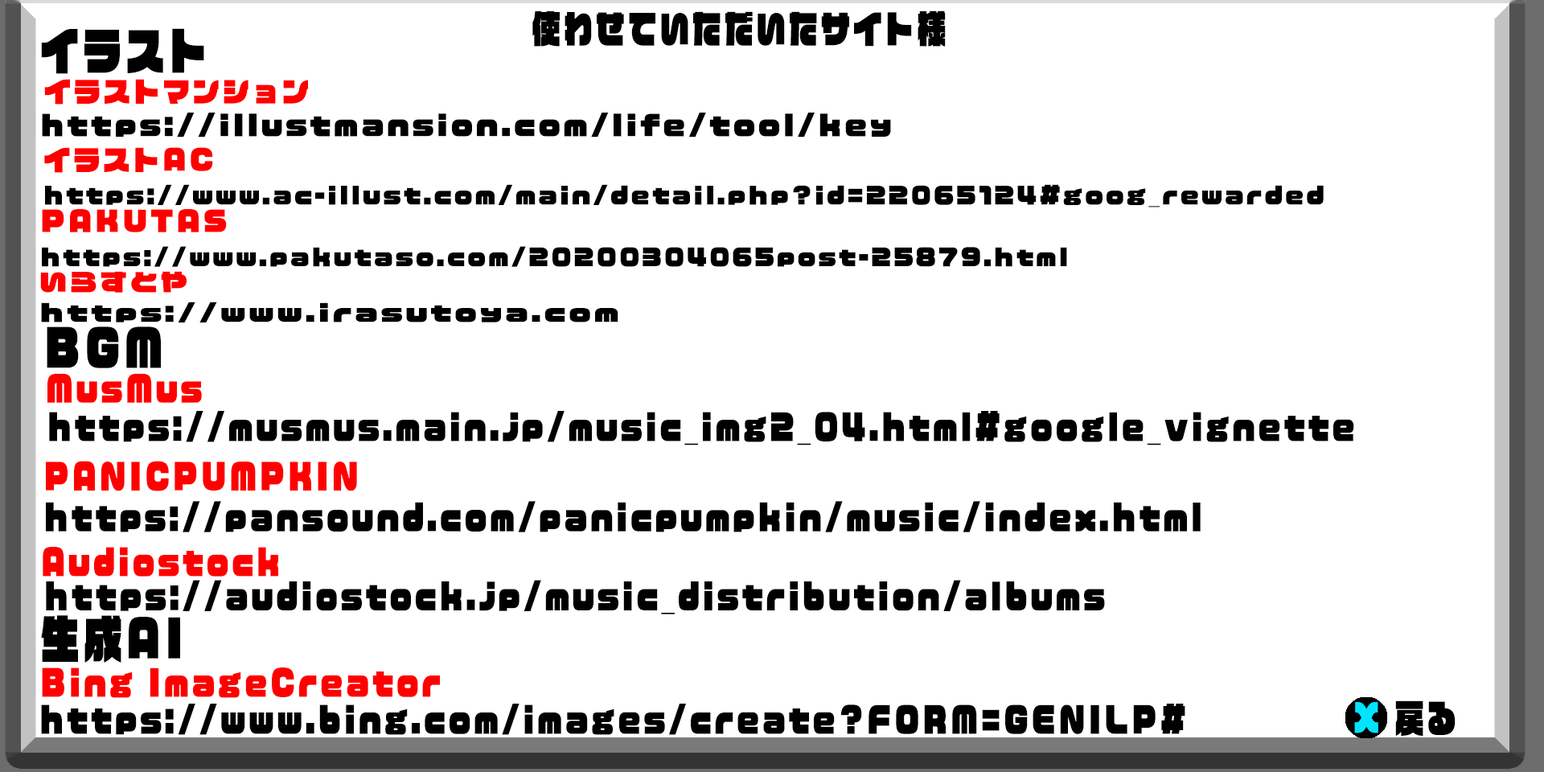
<style>
.page{position:relative;width:1544px;height:772px;background:#ffffff}
.page>*{position:absolute;margin:0}
.t1{font:37.6px "VDL-LogoJrBlack-Black";letter-spacing:0.11em;color:#000000;scale:0.77 1}
.t2{font:50.2px "VDL-LogoJrBlack-Black";letter-spacing:0.11em;color:#000000;scale:0.77 1}
.t3{font:27.6px "VDL-LogoJrBlack-Black";letter-spacing:0.11em;color:#ff0000}
.t4{font:27.6px "VDL-LogoJrBlack-Black";letter-spacing:0.11em;color:#000000}
.t5{font:23px "VDL-LogoJrBlack-Black";letter-spacing:0.11em;color:#000000}
.t6{font:23.1px "VDL-LogoJrBlack-Black";letter-spacing:0.11em;color:#000000;scale:1.18 1}
.t7{font:23.1px "VDL-LogoJrBlack-Black";letter-spacing:0.11em;color:#ff0000;scale:1.18 1}
.t8{font:35.3px "VDL-LogoJrBlack-Black";letter-spacing:0.11em;color:#ff0000;scale:0.77 1}
.t9{font:35.3px "VDL-LogoJrBlack-Black";letter-spacing:0.11em;color:#000000;scale:0.77 1}
.t10{font:37.6px "VDL-LogoJrBlack-Black";letter-spacing:0.11em;color:#00e4ff;scale:0.77 1}
</style>
<div class="page">
<p class="t1" style="left:532px;top:10px;width:414px;height:37px">使わせていただいたサイト様</p>
<p class="t2" style="left:41px;top:28px;width:163px;height:46px">イラスト</p>
<p class="t3" style="left:44px;top:79px;width:264px;height:26px">イラストマンション</p>
<p class="t4" style="left:42px;top:113px;width:849px;height:25px">https://illustmansion.com/life/tool/key</p>
<p class="t5" style="left:44px;top:147px;width:1280px;height:61px"><span class="t3">イラストAC<br></span>https://www.ac-illust.com/main/detail.php?id=22065124#goog_rewarded</p>
<p class="t5" style="left:42px;top:209px;width:1025px;height:58px"><span class="t3">PAKUTAS<br></span>https://www.pakutaso.com/20200304065post-25879.html</p>
<p class="t6" style="left:40px;top:271px;width:579px;height:52px"><span class="t7">いらすとや<br></span>https://www.irasutoya.com</p>
<p class="t2" style="left:47px;top:327px;width:114px;height:41px">BGM</p>
<p class="t8" style="left:47px;top:373px;width:155px;height:30px">MusMus</p>
<p class="t9" style="left:49px;top:411px;width:1305px;height:35px">https://musmus.main.jp/music_img2_04.html#google_vignette</p>
<p class="t8" style="left:46px;top:461px;width:311px;height:30px">PANICPUMPKIN</p>
<p class="t9" style="left:46px;top:501px;width:1155px;height:31px">https://pansound.com/panicpumpkin/music/index.html</p>
<p class="t8" style="left:43px;top:547px;width:235px;height:30px">Audiostock</p>
<p class="t9" style="left:46px;top:580px;width:1059px;height:35px">https://audiostock.jp/music_distribution/albums</p>
<p class="t2" style="left:41px;top:615px;width:139px;height:48px">生成AI</p>
<p class="t8" style="left:42px;top:668px;width:398px;height:30px">Bing ImageCreator</p>
<p class="t1" style="left:1354px;top:701px;width:102px;height:35px"><span class="t10">X </span>戻る</p>
<p class="t9" style="left:41px;top:704px;width:1145px;height:31px">https://www.bing.com/images/create?FORM=GENILP#</p>
</div>
